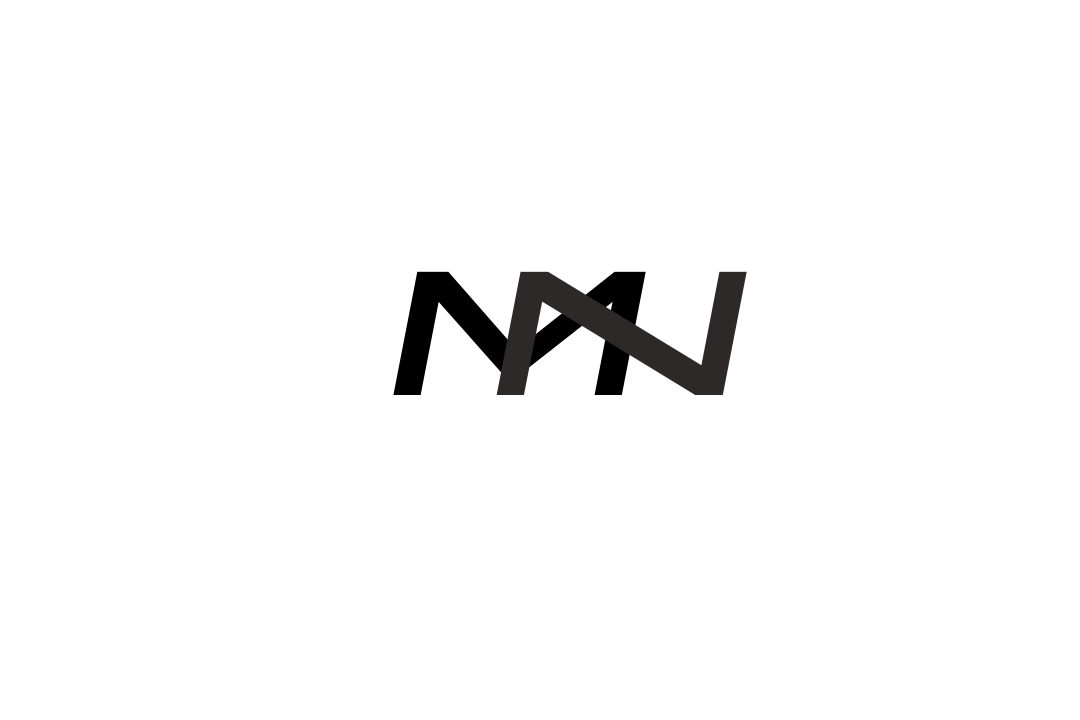
<style>
.page{position:relative;width:1080px;height:720px;background:#ffffff}
.page>*{position:absolute;margin:0}
.t1{font:254px "911PorschaSemi-Italic";color:#000000;text-transform:uppercase}
.t2{font:254px "911PorschaSemi-Italic";color:#2d2929;text-transform:uppercase}
</style>
<div class="page">
<p class="t1" style="left:393px;top:271px;width:253px;height:124px">M</p>
<p class="t2" style="left:496px;top:271px;width:251px;height:124px">N</p>
</div>
